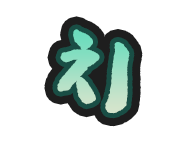
<style>
.page{position:relative;width:187px;height:143px;background:#ffffff}
.page>*{position:absolute;margin:0}
.t1{font:95px "SangSangRockOTF";letter-spacing:-0.08em}
</style>
<div class="page">
<p class="t1" style="left:59px;top:31px;width:69px;height:81px;rotate:8deg">치</p>
</div>
